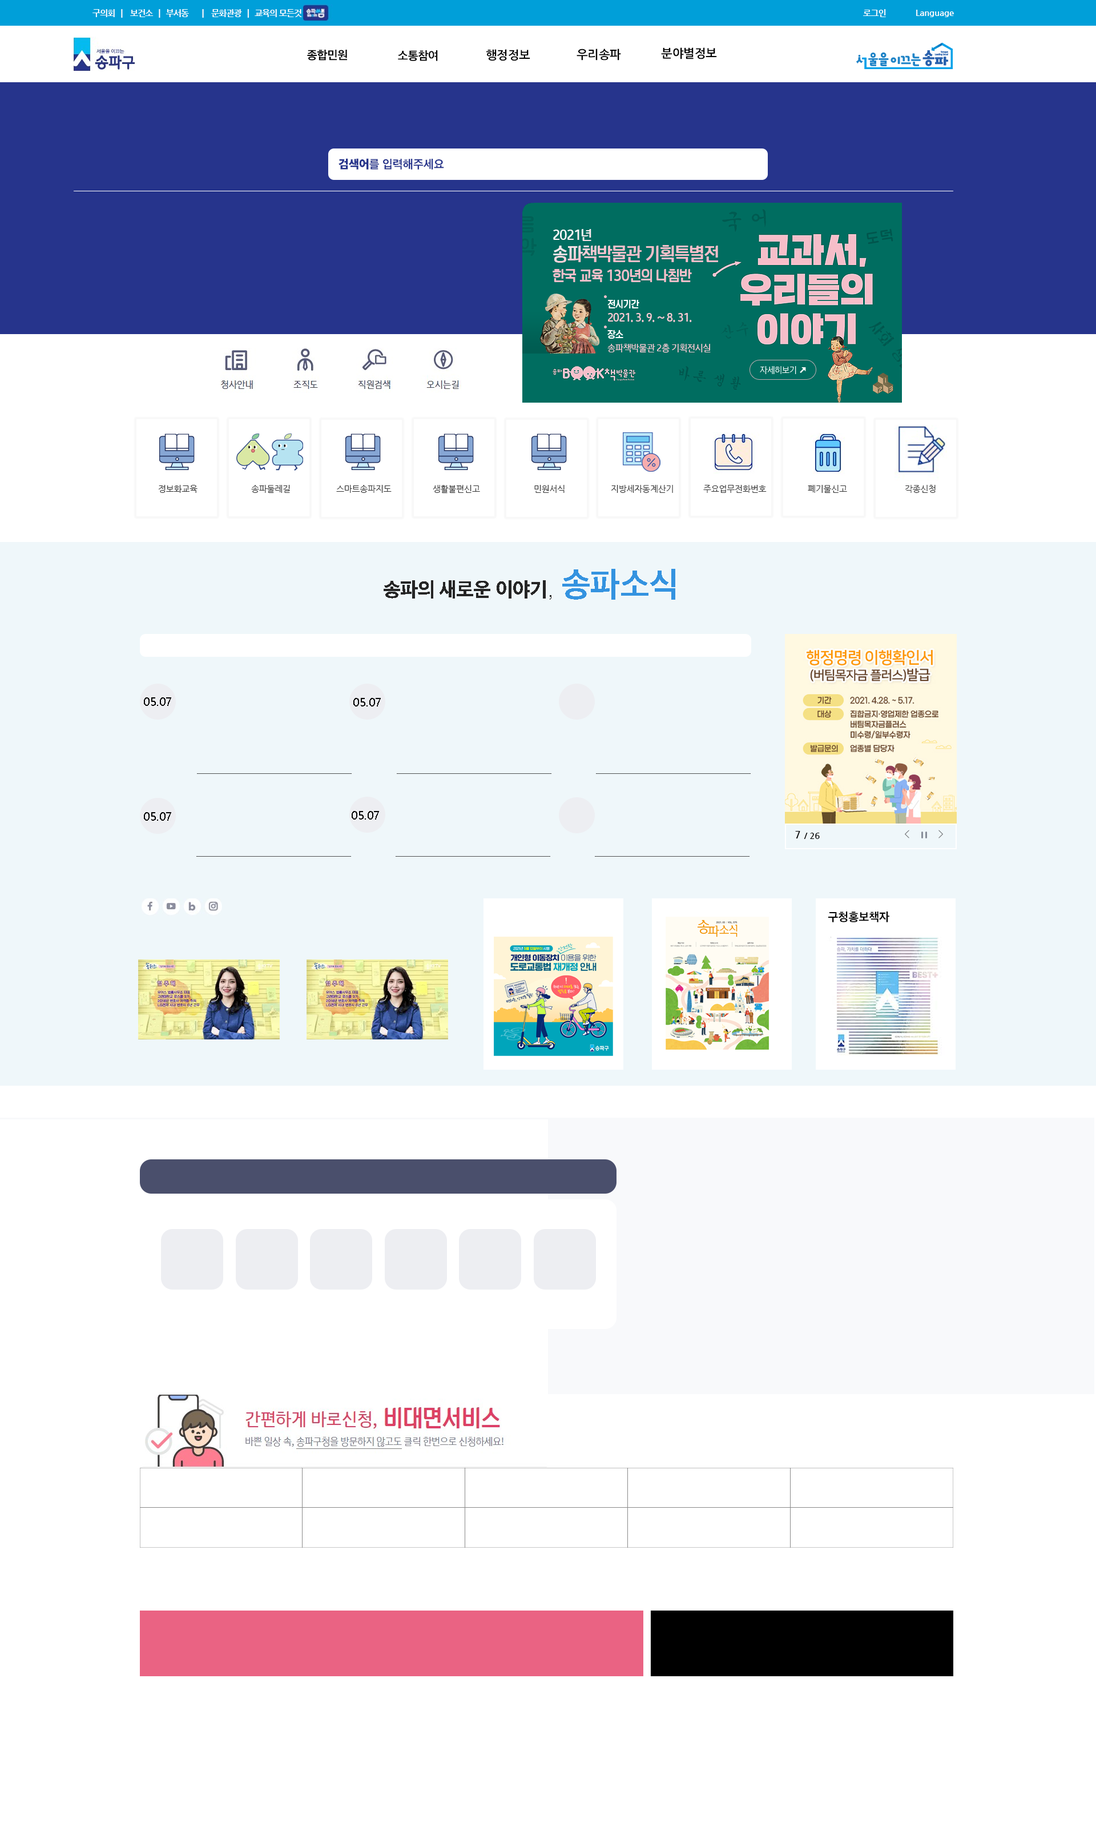
<style>
.page{position:relative;width:1096px;height:1839px;background:#ffffff}
.page>*{position:absolute;margin:0}
.t1{font:8.4px "NanumGothicBold";letter-spacing:-0.05em;color:#ffffff}
.t2{font:8.6px "NanumGothicBold";letter-spacing:-0.05em;color:#ffffff}
.t3{font:8.6px "NanumGothicBold";letter-spacing:-0.01em;color:#ffffff}
.t4{font:12px "AppleSDGothicNeoB00";letter-spacing:-0.01em;color:#000000}
.t5{font:11.9px "NanumGothicOTFBold";letter-spacing:-0.01em;color:#000000}
.t6{font:12px "NanumGothicOTFBold";letter-spacing:-0.01em;color:#000000}
.t7{font:12px "AppleSDGothicNeoB00";letter-spacing:-0.01em;color:#26348c}
.t8{font:12px "AppleSDGothicNeoH00";letter-spacing:-0.01em;color:#26348c}
.t9{font:8.5px "NanumGothic";letter-spacing:-0.01em;color:#333333}
.t10{font:20.6px "AppleSDGothicNeoEB00";letter-spacing:-0.025em;color:#252525}
.t11{font:20.6px "Dotum";letter-spacing:-0.01em;color:#252525}
.t12{font:34.3px "AppleSDGothicNeoB00";letter-spacing:-0.01em;color:#3493e0}
.t13{font:12.2px "MalgunGothic";letter-spacing:-0.01em;color:#000000;scale:0.94 1}
.t14{font:9.4px "NanumGothicBold";letter-spacing:-0.01em;color:#000000}
.t15{font:8.6px "NanumGothicBold";letter-spacing:-0.01em;color:#000000}
</style>
<div class="page">
<p class="t1" style="left:93px;top:9px;width:209px;height:9px">구의회   |    보건소   |   부서동       |    문화관광   |   교육의 모든것</p>
<p class="t2" style="left:863px;top:9px;width:23px;height:8px">로그인</p>
<p class="t3" style="left:917px;top:10px;width:37px;height:7px">Language</p>
<p class="t4" style="left:307px;top:50px;width:40px;height:11px">종합민원</p>
<p class="t4" style="left:398px;top:50px;width:40px;height:11px">소통참여</p>
<p class="t5" style="left:487px;top:49px;width:44px;height:12px">행정정보</p>
<p class="t5" style="left:577px;top:49px;width:44px;height:12px">우리송파</p>
<p class="t6" style="left:661px;top:47px;width:56px;height:12px">분야별정보</p>
<p class="t7" style="left:339px;top:158px;width:105px;height:12px"><span class="t8">검색어</span>를 입력해주세요</p>
<p class="t9" style="left:158px;top:485px;width:40px;height:8px">정보화교육</p>
<p class="t9" style="left:251px;top:485px;width:39px;height:8px">송파둘레길</p>
<p class="t9" style="left:336px;top:485px;width:56px;height:8px">스마트송파지도</p>
<p class="t9" style="left:433px;top:485px;width:47px;height:8px">생활불편신고</p>
<p class="t9" style="left:535px;top:485px;width:30px;height:8px">민원서식</p>
<p class="t9" style="left:612px;top:485px;width:61px;height:8px">지방세자동계산기</p>
<p class="t9" style="left:704px;top:485px;width:63px;height:8px">주요업무전화번호</p>
<p class="t9" style="left:808px;top:485px;width:39px;height:8px">폐기물신고</p>
<p class="t9" style="left:905px;top:485px;width:31px;height:8px">각종신청</p>
<p class="t10" style="left:384px;top:569px;width:292px;height:31px">송파의 새로운 이야기<span class="t11">, </span><span class="t12">송파소식</span></p>
<p class="t13" style="left:144px;top:697px;width:27px;height:9px">05.07</p>
<p class="t13" style="left:354px;top:698px;width:27px;height:8px">05.07</p>
<p class="t13" style="left:144px;top:812px;width:27px;height:9px">05.07</p>
<p class="t13" style="left:352px;top:811px;width:27px;height:9px">05.07</p>
<p class="t14" style="left:796px;top:831px;width:5px;height:7px">7</p>
<p class="t15" style="left:804px;top:833px;width:16px;height:6px">/ 26</p>
<p class="t4" style="left:829px;top:911px;width:61px;height:11px">구청홍보책자</p>
</div>
